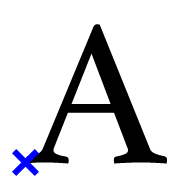
<style>
.page{position:relative;width:192px;height:192px;background:#ffffff}
.page>*{position:absolute;margin:0}
.t1{font:208.3px "Athelas-Regular";color:#000000}
</style>
<div class="page">
<p class="t1" style="left:25px;top:24px;width:142px;height:140px">A</p>
</div>
